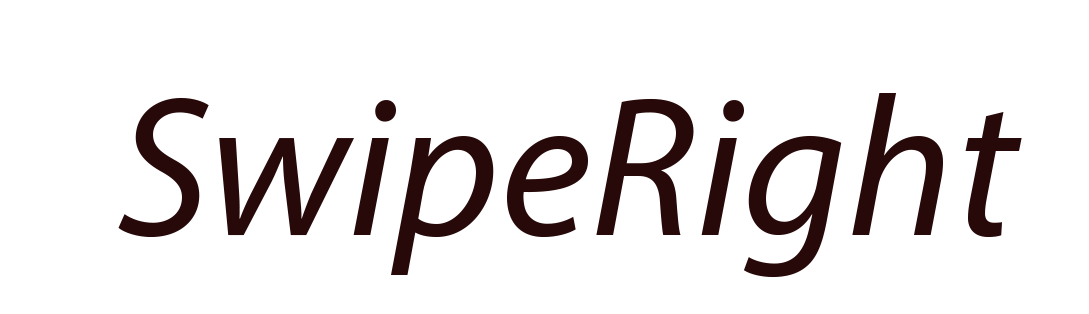
<style>
.page{position:relative;width:1089px;height:314px;background:#ffffff}
.page>*{position:absolute;margin:0}
.t1{font:200px "MyriadPro-It";color:#270909}
</style>
<div class="page">
<p class="t1" style="left:118px;top:93px;width:904px;height:185px">SwipeRight</p>
</div>
